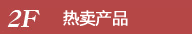
<style>
.page{position:relative;width:192px;height:34px;background:#b54746}
.page>*{position:absolute;margin:0}
.t1{font:16px "MicrosoftYaHei";color:#ffffff;font-weight:bold}
</style>
<div class="page">
<p class="t1" style="left:63px;top:10px;width:65px;height:16px">热卖产品</p>
</div>
